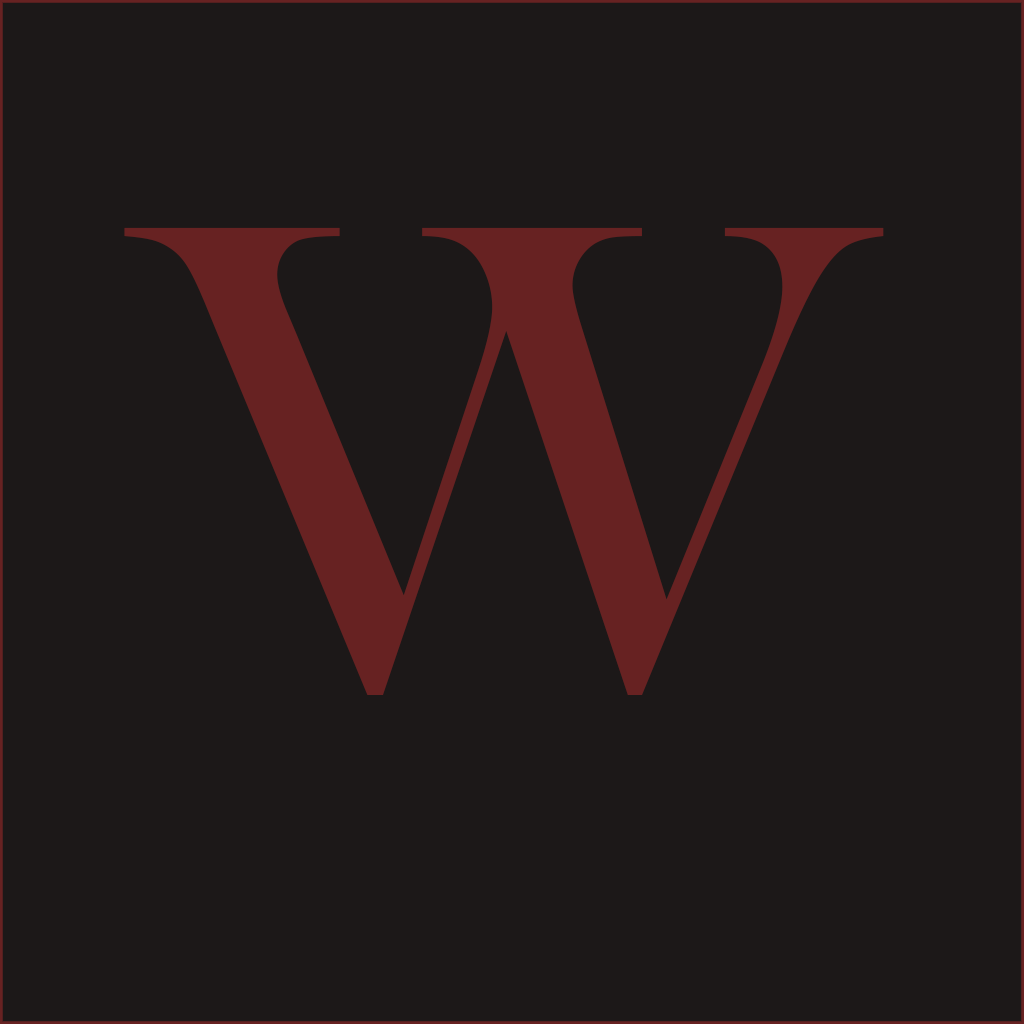
<style>
.page{position:relative;width:1024px;height:1024px;background:#1c1818}
.page>*{position:absolute;margin:0}
.t1{font:700px "BaskOldFace";color:#672222}
</style>
<div class="page">
<p class="t1" style="left:124px;top:227px;width:760px;height:468px">W</p>
</div>
